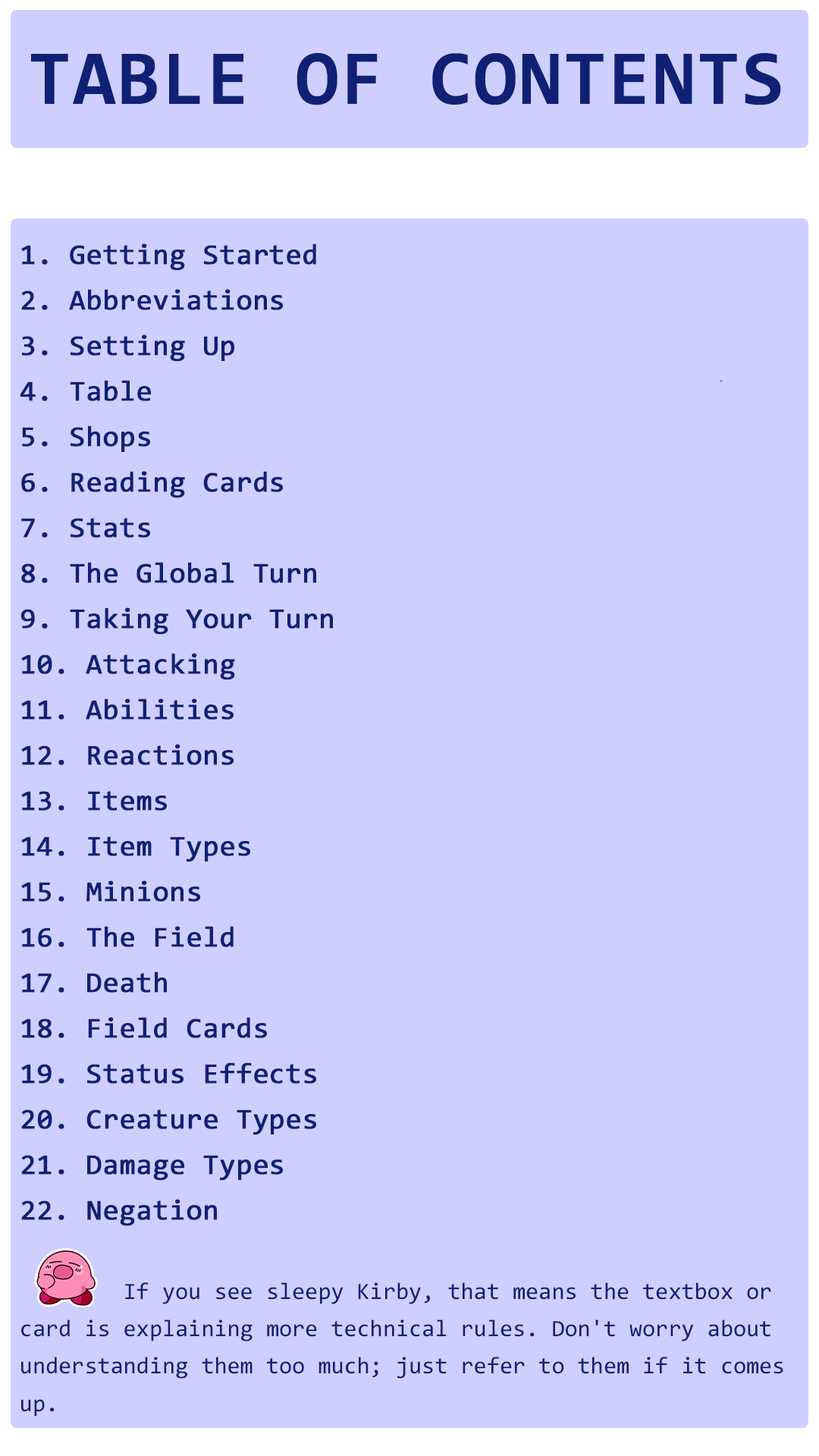
<style>
.page{position:relative;width:819px;height:1456px;background:#cfcfff}
.page>*{position:absolute;margin:0}
.t1{font:78.3px "Consolas-Bold";letter-spacing:0.02em;color:#102175}
.t2{font:28.8px/45.5px "Consolas";color:#102175;font-weight:bold}
.t3{font:23.6px/37.3px "Consolas";color:#102175}
</style>
<div class="page">
<p class="t1" style="left:31px;top:53px;width:750px;height:52px">TABLE OF CONTENTS</p>
<p class="t2" style="left:20px;top:243px;width:313px;height:983px">1. Getting Started<br>2. Abbreviations<br>3. Setting Up<br>4. Table<br>5. Shops<br>6. Reading Cards<br>7. Stats<br>8. The Global Turn<br>9. Taking Your Turn<br>10. Attacking<br>11. Abilities<br>12. Reactions<br>13. Items<br>14. Item Types<br>15. Minions<br>16. The Field<br>17. Death<br>18. Field Cards<br>19. Status Effects<br>20. Creature Types<br>21. Damage Types<br>22. Negation</p>
<p class="t3" style="left:21px;top:1282px;width:762px;height:135px">If you see sleepy Kirby, that means the textbox or card is explaining more technical rules. Don't worry about understanding them too much; just refer to them if it comes up.</p>
</div>
